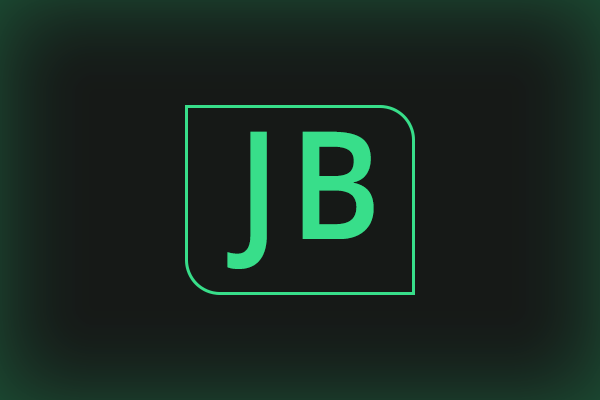
<style>
.page{position:relative;width:600px;height:400px;background:#161917}
.page>*{position:absolute;margin:0}
.t1{font:150px "OpenSans-Semibold";letter-spacing:0.075em;color:#38de8a;scale:0.92 1}
</style>
<div class="page">
<p class="t1" style="left:227px;top:131px;width:147px;height:138px">JB</p>
</div>
